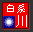
<style>
.page{position:relative;width:33px;height:32px;background:#f20000}
.page>*{position:absolute;margin:0}
.t1{font:10.4px "SimSun";color:#ffffff}
.t2{font:11.7px "SimSun";color:#ffffff}
</style>
<div class="page">
<p class="t1" style="left:7px;top:4px;width:18px;height:9px">白系</p>
<p class="t2" style="left:16px;top:15px;width:11px;height:12px">川</p>
</div>
